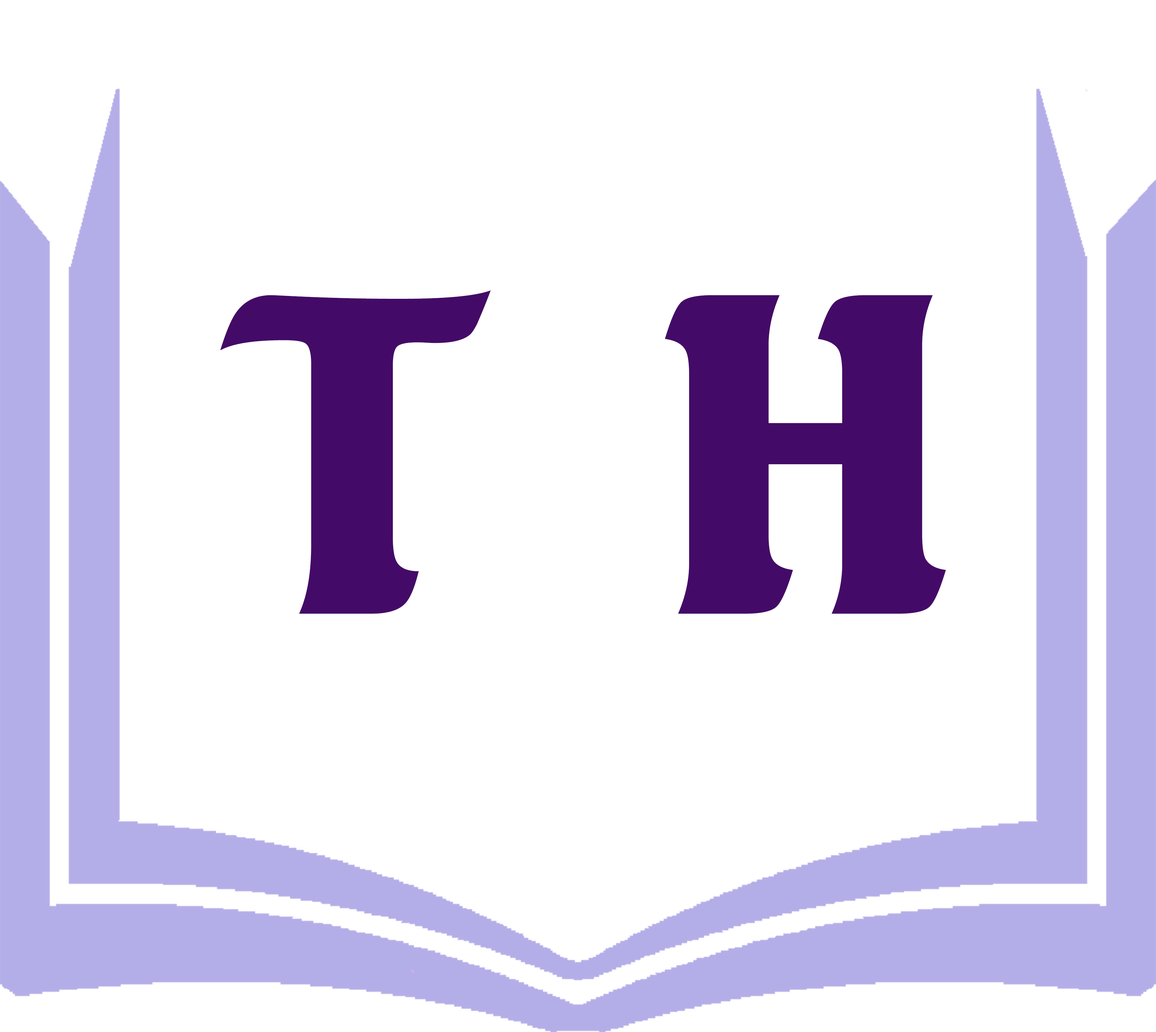
<style>
.page{position:relative;width:1156px;height:1032px;background:#ffffff}
.page>*{position:absolute;margin:0}
.t1{font:441px "UTMSeagullBold";color:#440a67}
</style>
<div class="page">
<p class="t1" style="left:220px;top:290px;width:271px;height:324px">T</p>
<p class="t1" style="left:664px;top:295px;width:282px;height:319px">H</p>
</div>
